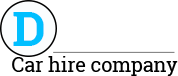
<style>
.page{position:relative;width:178px;height:76px;background:#ffffff}
.page>*{position:absolute;margin:0}
.t1{font:49.2px "RobotoSlab-Bold";color:#00bfff}
.t2{font:19.7px "RobotoSlab-Regular";color:#000000}
</style>
<div class="page">
<p class="t1" style="left:13px;top:12px;width:31px;height:34px">D</p>
<p class="t2" style="left:12px;top:56px;width:166px;height:20px">Car hire company</p>
</div>
